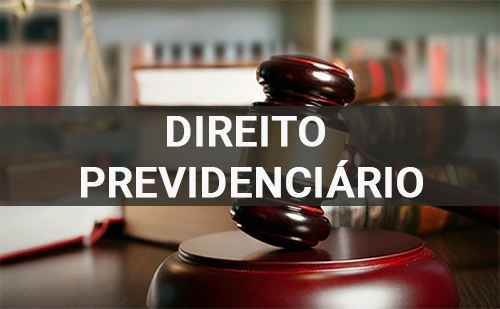
<style>
.page{position:relative;width:500px;height:309px}
.page>*{position:absolute;margin:0}
.t1{font:42px "Roboto-Medium";color:#f8f8f8;font-weight:bold}
</style>
<div class="page">
<p class="t1" style="left:81px;top:116px;width:342px;height:82px;text-align:center">DIREITO <br>PREVIDENCIÁRIO</p>
</div>
